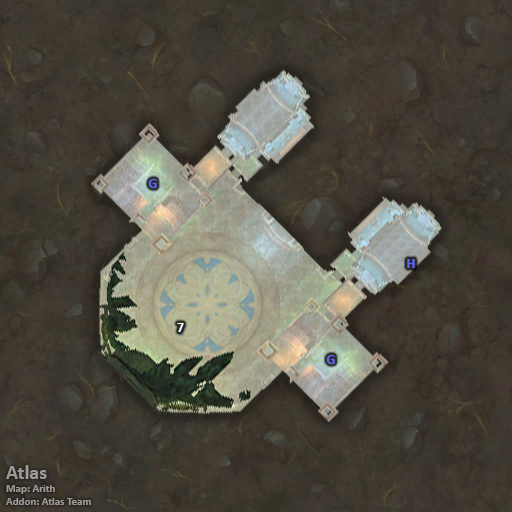
<style>
.page{position:relative;width:512px;height:512px}
.page>*{position:absolute;margin:0}
.t1{font:14px "Calibri-Bold";color:#6666ff}
.t2{font:14px "Calibri-Bold";color:#ffffff}
.t3{font:11px "Calibri-Bold";color:#9d9b98}
.t4{font:20px "Calibri-Bold";color:#9d9b98}
</style>
<div class="page">
<p class="t1" style="left:148px;top:179px;width:9px;height:9px">G</p>
<p class="t1" style="left:407px;top:259px;width:8px;height:9px">H</p>
<p class="t2" style="left:177px;top:323px;width:7px;height:9px">7</p>
<p class="t1" style="left:326px;top:355px;width:9px;height:9px">G</p>
<p class="t3" style="left:6px;top:465px;width:85px;height:40px"><span class="t4">Atlas<br></span>Map: Arith<br>Addon: Atlas Team</p>
</div>
